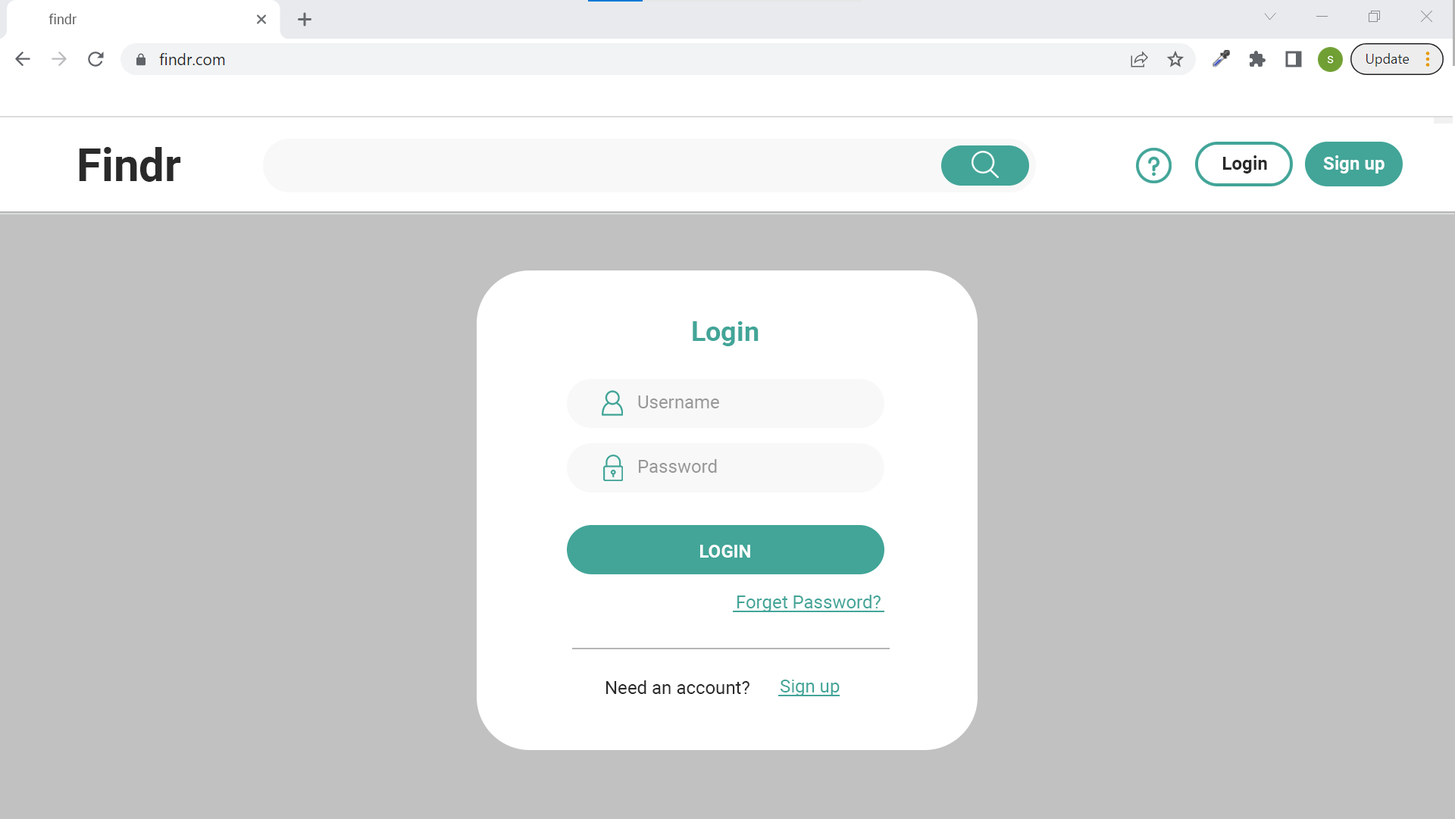
<style>
.page{position:relative;width:1455px;height:819px;background:#c1c1c1}
.page>*{position:absolute;margin:0}
.t1{font:13.6px "Roboto-Regular";color:#5f5f5f}
.t2{font:45.5px "Roboto-Bold";color:#2a2a2a}
.t3{font:18.2px "Roboto-Bold";color:#2a2a2a}
.t4{font:18.2px "Roboto-Bold";color:#ffffff}
.t5{font:27.3px "Roboto-Bold";color:#42a598}
.t6{font:18.2px "Roboto-Regular";color:#989898}
.t7{font:18.2px "Roboto-Regular";color:#42a598}
.t8{font:18.2px "Roboto-Regular";color:#2a2a2a}
</style>
<div class="page">
<p class="t1" style="left:49px;top:14px;width:28px;height:10px">findr</p>
<p class="t2" style="left:79px;top:147px;width:102px;height:35px">Findr</p>
<p class="t3" style="left:1223px;top:155px;width:44px;height:19px">Login</p>
<p class="t4" style="left:1323px;top:155px;width:62px;height:19px">Sign up</p>
<p class="t5" style="left:693px;top:321px;width:66px;height:25px">Login</p>
<p class="t6" style="left:638px;top:396px;width:81px;height:13px">Username</p>
<p class="t6" style="left:639px;top:459px;width:78px;height:14px">Password</p>
<p class="t4" style="left:700px;top:545px;width:50px;height:13px">LOGIN</p>
<p class="t7" style="left:738px;top:595px;width:143px;height:17px">Forget Password?</p>
<p class="t8" style="left:606px;top:681px;width:144px;height:13px">Need an account?</p>
<p class="t7" style="left:780px;top:680px;width:60px;height:17px">Sign up</p>
</div>
